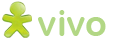
<style>
.page{position:relative;width:114px;height:40px;background:#ffffff}
.page>*{position:absolute;margin:0}
.t1{font:36px "ArialRoundedMTBold";color:#b2d785}
</style>
<div class="page">
<p class="t1" style="left:38px;top:10px;width:68px;height:26px">vivo</p>
</div>
